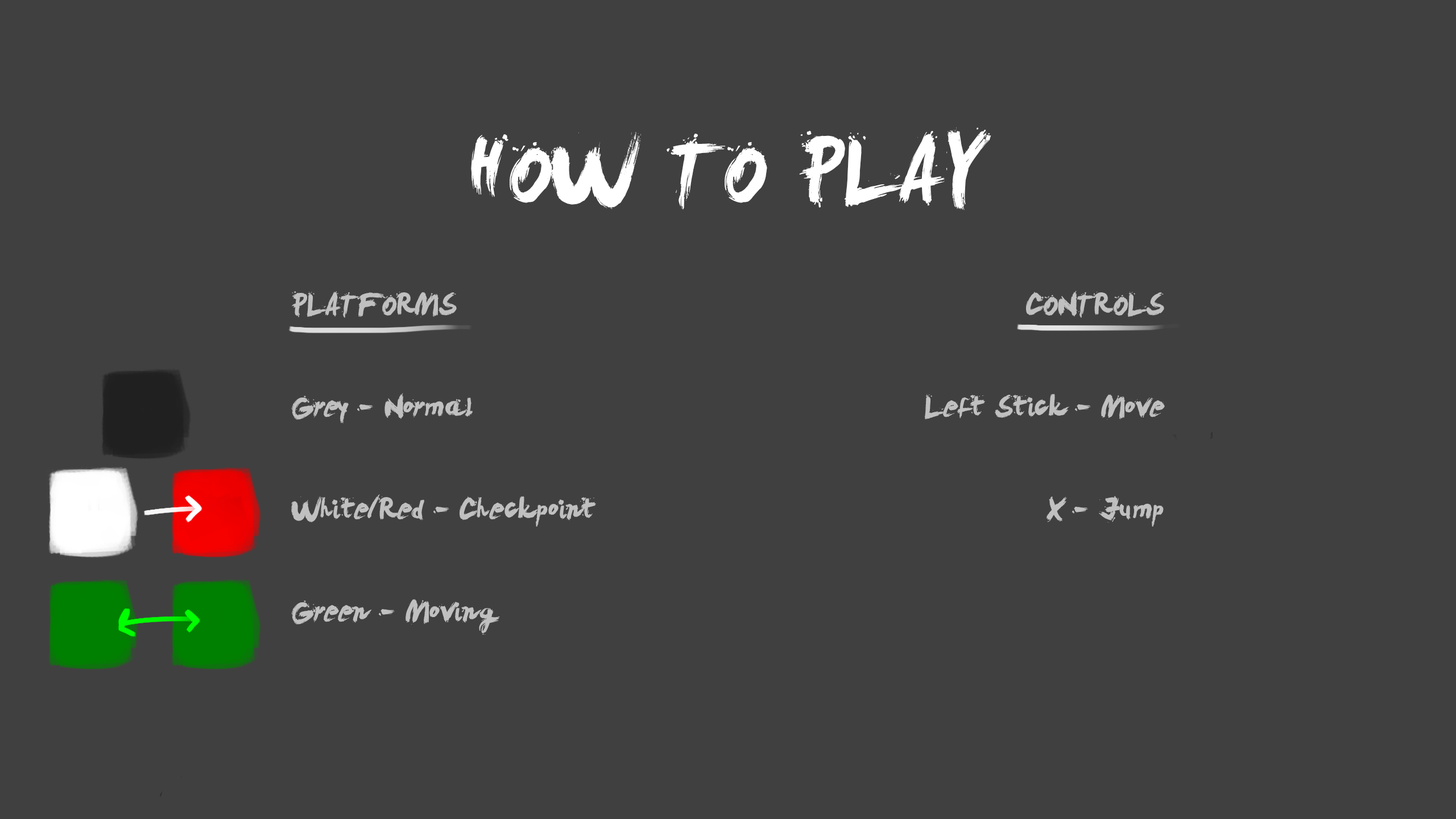
<style>
.page{position:relative;width:1456px;height:819px;background:#404040}
.page>*{position:absolute;margin:0}
.t1{font:85.3px "LeviBrush";color:#ffffff}
.t2{font:28.4px "LeviBrush";color:#c0c0c0}
</style>
<div class="page">
<p class="t1" style="left:471px;top:127px;width:520px;height:83px">HOW TO PLAY</p>
<p class="t2" style="left:291px;top:291px;width:305px;height:344px">PLATFORMS<br><br><br>Grey - Normal<br><br><br>White/Red - Checkpoint<br><br><br>Green - Moving</p>
<p class="t2" style="left:924px;top:291px;width:241px;height:236px;text-align:right">CONTROLS<br><br><br>Left Stick - Move<br><br><br>X - Jump</p>
</div>
